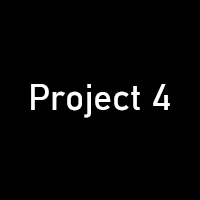
<style>
.page{position:relative;width:200px;height:200px;background:#000000}
.page>*{position:absolute;margin:0}
.t1{font:35.6px "Bahnschrift";color:#ffffff}
</style>
<div class="page">
<p class="t1" style="left:31px;top:84px;width:139px;height:34px">Project 4</p>
</div>
